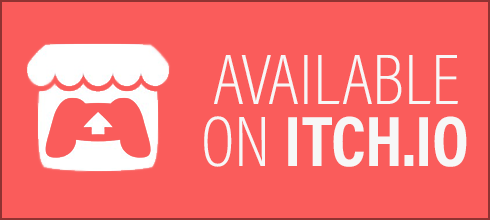
<style>
.page{position:relative;width:490px;height:220px;background:#fa5c5b}
.page>*{position:absolute;margin:0}
.t1{font:72px "AcuminConcept-CondensedExtraLight";color:#f7f7f7}
.t2{font:72px "AcuminConcept-CondensedBold";color:#f7f7f7}
</style>
<div class="page">
<p class="t1" style="left:214px;top:55px;width:244px;height:49px">AVAILABLE</p>
<p class="t2" style="left:204px;top:116px;width:263px;height:51px"><span class="t1">ON </span>ITCH.IO</p>
</div>
